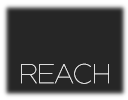
<style>
.page{position:relative;width:128px;height:100px;background:#262626}
.page>*{position:absolute;margin:0}
.t1{font:24px "Adequate-ExtraLight"}
</style>
<div class="page">
<p class="t1" style="left:21px;top:63px;width:88px;height:21px">REACH</p>
</div>
